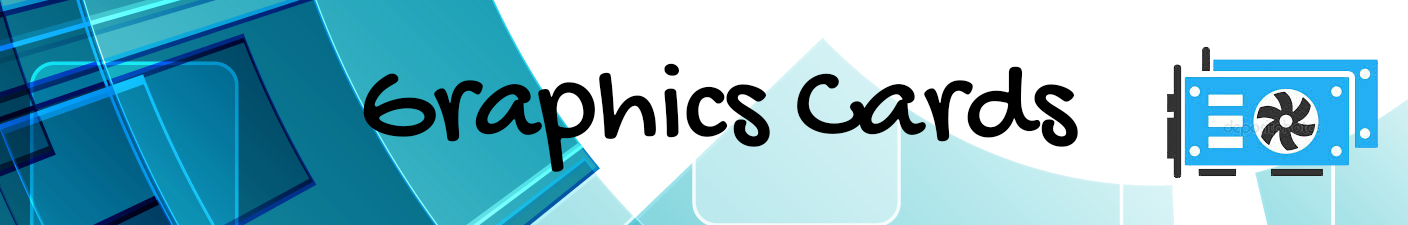
<style>
.page{position:relative;width:1408px;height:225px;background:#ffffff}
.page>*{position:absolute;margin:0}
.t1{font:116.7px "GochiHand-Regular";color:#000000}
</style>
<div class="page">
<p class="t1" style="left:363px;top:63px;width:715px;height:109px">Graphics Cards</p>
</div>
